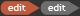
<style>
.page{position:relative;width:80px;height:16px;background:#333333}
.page>*{position:absolute;margin:0}
.t1{font:10px "TrebuchetMS";color:#ffffff}
</style>
<div class="page">
<p class="t1" style="left:8px;top:4px;width:18px;height:7px">edit</p>
<p class="t1" style="left:48px;top:4px;width:18px;height:7px">edit</p>
</div>
